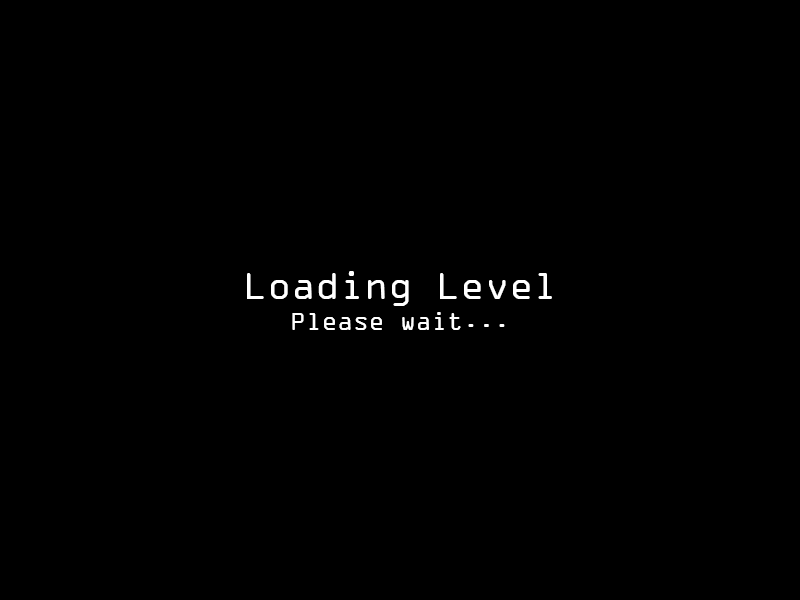
<style>
.page{position:relative;width:800px;height:600px;background:#000000}
.page>*{position:absolute;margin:0}
.t1{font:26px "OCRAExtended";color:#ffffff}
.t2{font:40px "OCRAExtended";color:#ffffff}
</style>
<div class="page">
<p class="t1" style="left:247px;top:271px;width:305px;height:59px;text-align:center"><span class="t2">Loading Level<br></span>Please wait...</p>
</div>
